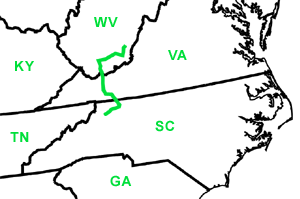
<style>
.page{position:relative;width:300px;height:199px;background:#ffffff}
.page>*{position:absolute;margin:0}
.t1{font:14px "Arial-BoldMT";letter-spacing:0.05em;color:#00df3a}
</style>
<div class="page">
<p class="t1" style="left:94px;top:17px;width:24px;height:10px">WV</p>
<p class="t1" style="left:168px;top:50px;width:19px;height:10px">VA</p>
<p class="t1" style="left:15px;top:61px;width:19px;height:10px">KY</p>
<p class="t1" style="left:155px;top:120px;width:20px;height:12px">SC</p>
<p class="t1" style="left:10px;top:132px;width:19px;height:10px">TN</p>
<p class="t1" style="left:110px;top:175px;width:22px;height:12px">GA</p>
</div>
